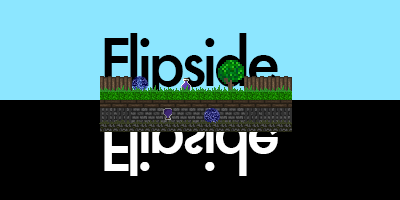
<style>
.page{position:relative;width:400px;height:200px;background:#000000}
.page>*{position:absolute;margin:0}
.t1{font:64.1px "Futura-Medium";letter-spacing:-0.075em;color:#000000}
.t2{font:64.1px "Futura-Medium";letter-spacing:-0.075em;color:#ffffff}
</style>
<div class="page">
<p class="t1" style="left:104px;top:33px;width:174px;height:70px">Flipside</p>
<p class="t2" style="left:104px;top:106px;width:174px;height:70px">Flipside</p>
</div>
